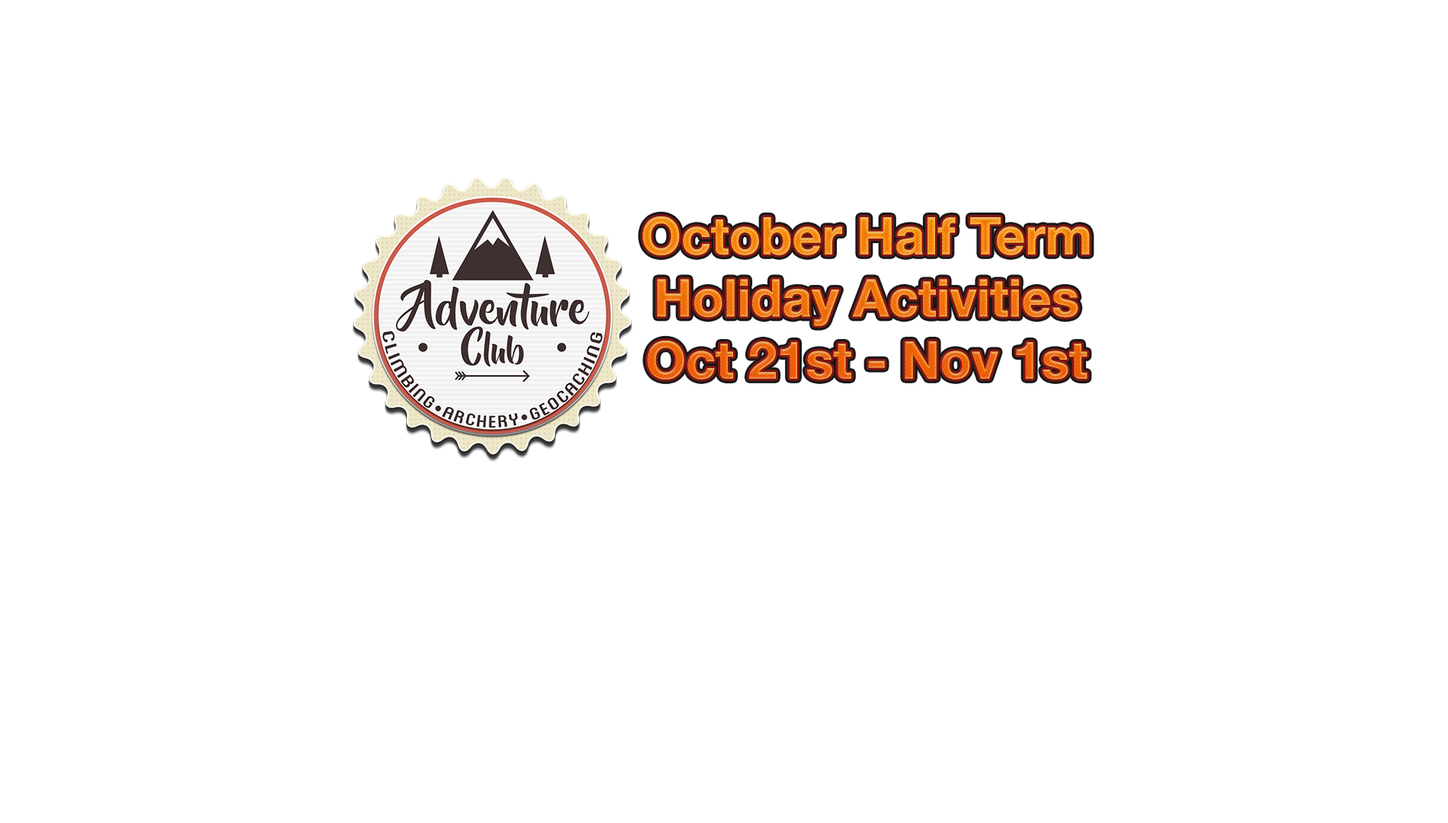
<style>
.page{position:relative;width:1448px;height:823px;background:#ffffff}
.page>*{position:absolute;margin:0}
.t1{font:51.8px "HelveticaNeue-Bold"}
</style>
<div class="page">
<p class="t1" style="left:643px;top:216px;width:447px;height:164px;text-align:center">October Half Term<br>Holiday Activities<br>Oct 21st - Nov 1st</p>
</div>
